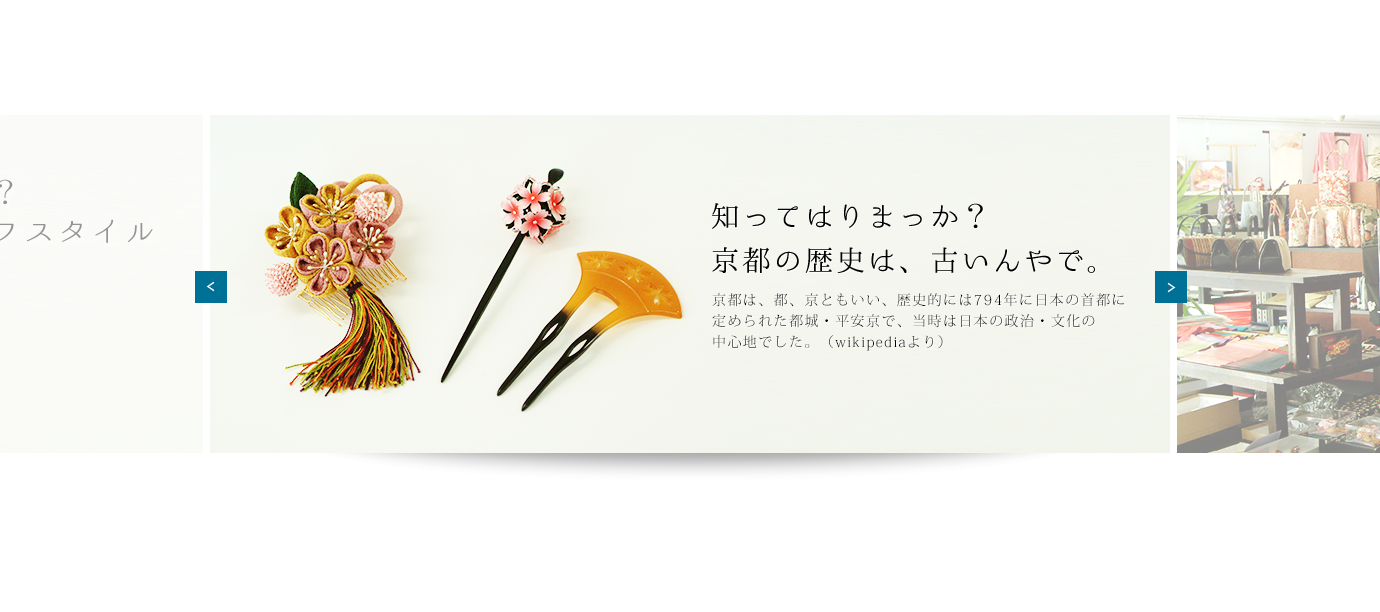
<style>
.page{position:relative;width:1380px;height:612px;background:#ffffff}
.page>*{position:absolute;margin:0}
.t1{font:29px/39px "02UtsukushiMincho";letter-spacing:0.16em;color:#949494}
.t2{font:29px/44px "02UtsukushiMincho";letter-spacing:0.08em;color:#000000}
.t3{font:14px "UDReiminPro-Heavy";letter-spacing:0.1em;color:#ffffff;scale:0.76 1}
.t4{font:14px/21px "KozMinPr6N-Light";letter-spacing:0.1em;color:#000000}
</style>
<div class="page">
<p class="t1" style="left:0px;top:179px;width:153px;height:64px">知ってはりまっか？<br>江一のきものライフスタイル</p>
<p class="t2" style="left:712px;top:203px;width:383px;height:70px">知ってはりまっか？<br>京都の歴史は、古いんやで。</p>
<p class="t3" style="left:206px;top:281px;width:9px;height:11px;rotate:180deg">＞</p>
<p class="t4" style="left:712px;top:293px;width:412px;height:58px">京都は、都、京ともいい、歴史的には794年に日本の首都に<br>定められた都城・平安京で、当時は日本の政治・文化の<br>中心地でした。（wikipediaより）</p>
<p class="t3" style="left:1167px;top:282px;width:9px;height:11px">＞</p>
</div>
